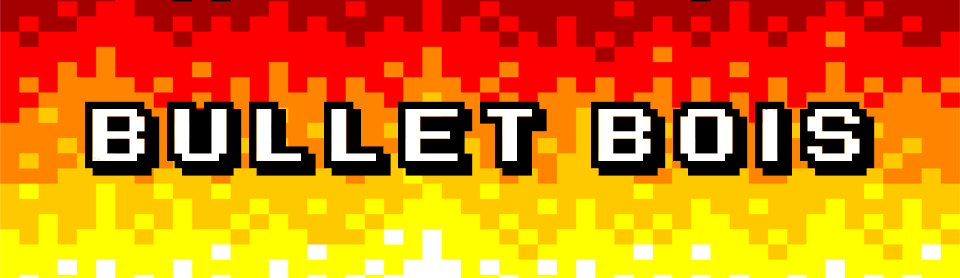
<style>
.page{position:relative;width:960px;height:278px;background:#ff0000}
.page>*{position:absolute;margin:0}
.t1{font:76px "KarmaticArcade";letter-spacing:0.2em;color:#000000}
</style>
<div class="page">
<p class="t1" style="left:85px;top:101px;width:790px;height:75px">Bullet Bois</p>
</div>
